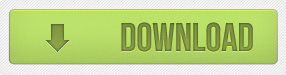
<style>
.page{position:relative;width:286px;height:75px}
.page>*{position:absolute;margin:0}
.t1{font:40px "BebasNeue";color:#788c3d}
</style>
<div class="page">
<p class="t1" style="left:121px;top:22px;width:132px;height:30px">Download</p>
</div>
